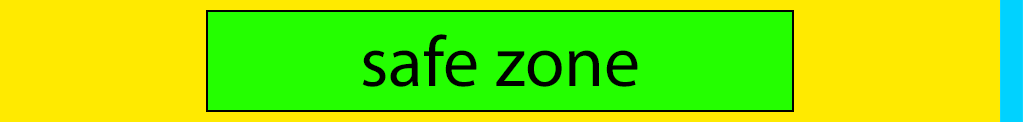
<style>
.page{position:relative;width:1023px;height:122px;background:#ffea00}
.page>*{position:absolute;margin:0}
.t1{font:72px "MyriadPro-Regular";color:#000000}
</style>
<div class="page">
<p class="t1" style="left:362px;top:34px;width:276px;height:53px">safe zone</p>
</div>
